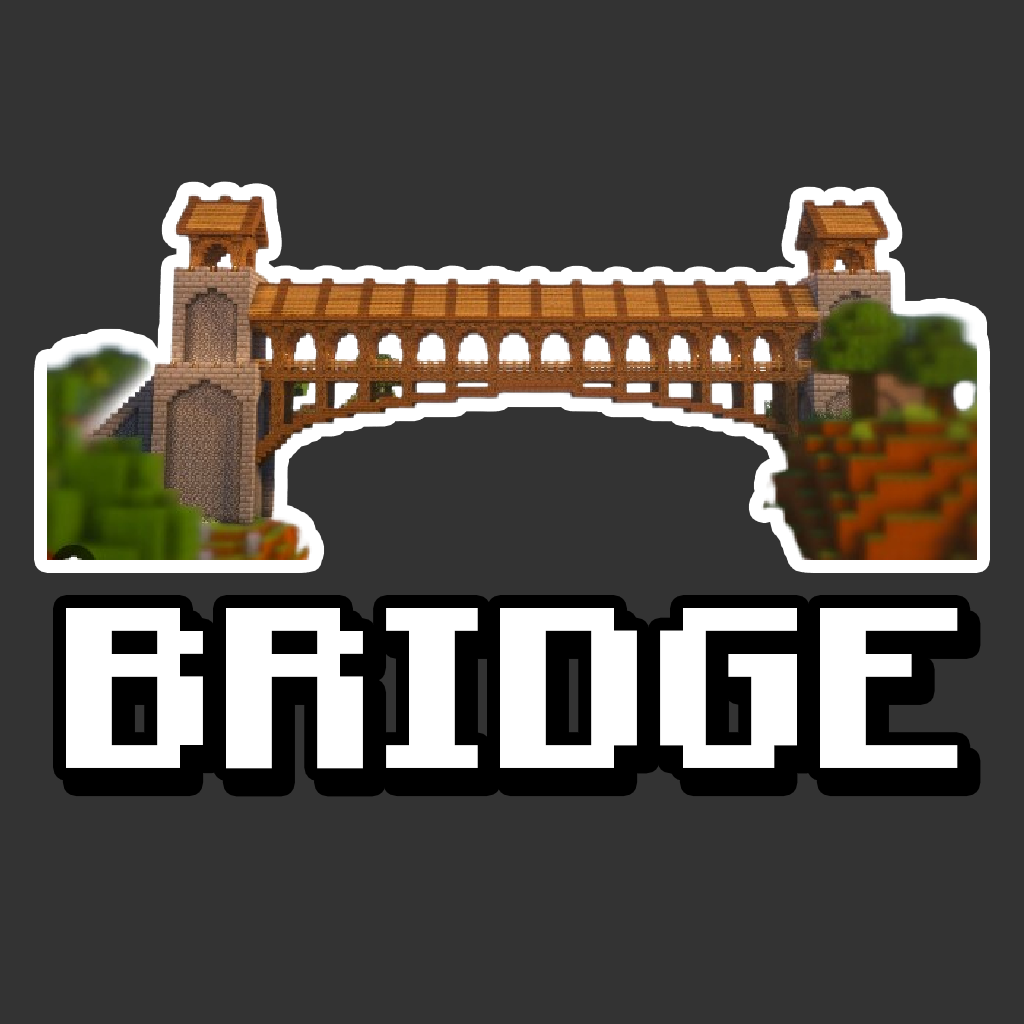
<style>
.page{position:relative;width:1024px;height:1024px;background:#333333}
.page>*{position:absolute;margin:0}
.t1{font:228.6px "Minecraft-Bold";color:#ffffff}
</style>
<div class="page">
<p class="t1" style="left:66px;top:608px;width:892px;height:161px">BRIDGE</p>
</div>
